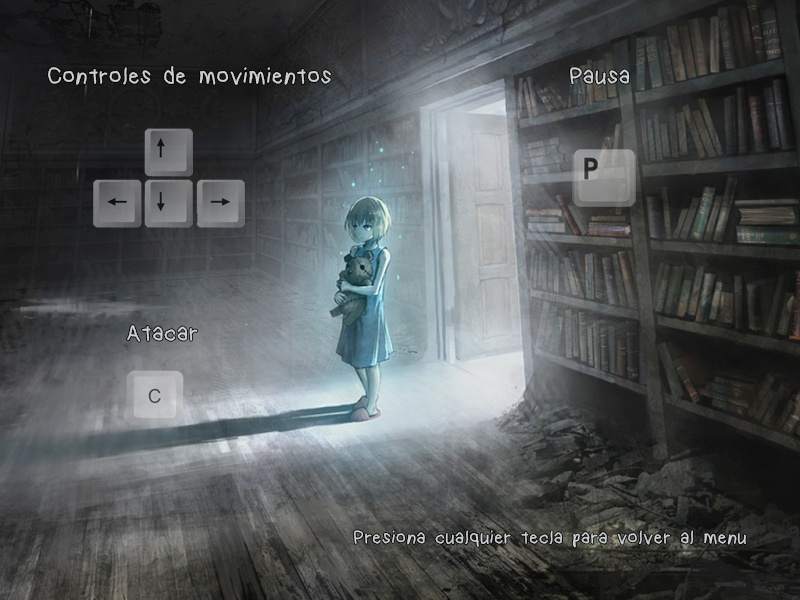
<style>
.page{position:relative;width:800px;height:600px}
.page>*{position:absolute;margin:0}
.t1{font:25px "kindergarten";color:#ced1d3}
.t2{font:20px "kindergarten";color:#ced1d3}
</style>
<div class="page">
<p class="t1" style="left:48px;top:66px;width:283px;height:19px">Controles de movimientos</p>
<p class="t1" style="left:570px;top:67px;width:60px;height:18px">Pausa</p>
<p class="t1" style="left:127px;top:325px;width:71px;height:17px">Atacar</p>
<p class="t2" style="left:353px;top:530px;width:393px;height:18px">Presiona cualquier tecla para volver al menu</p>
</div>
